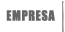
<style>
.page{position:relative;width:65px;height:32px;background:#ffffff}
.page>*{position:absolute;margin:0}
.t1{font:13px "Impact";letter-spacing:0.05em;color:#666666;scale:0.95 1}
</style>
<div class="page">
<p class="t1" style="left:6px;top:10px;width:49px;height:11px">EMPRESA</p>
</div>
